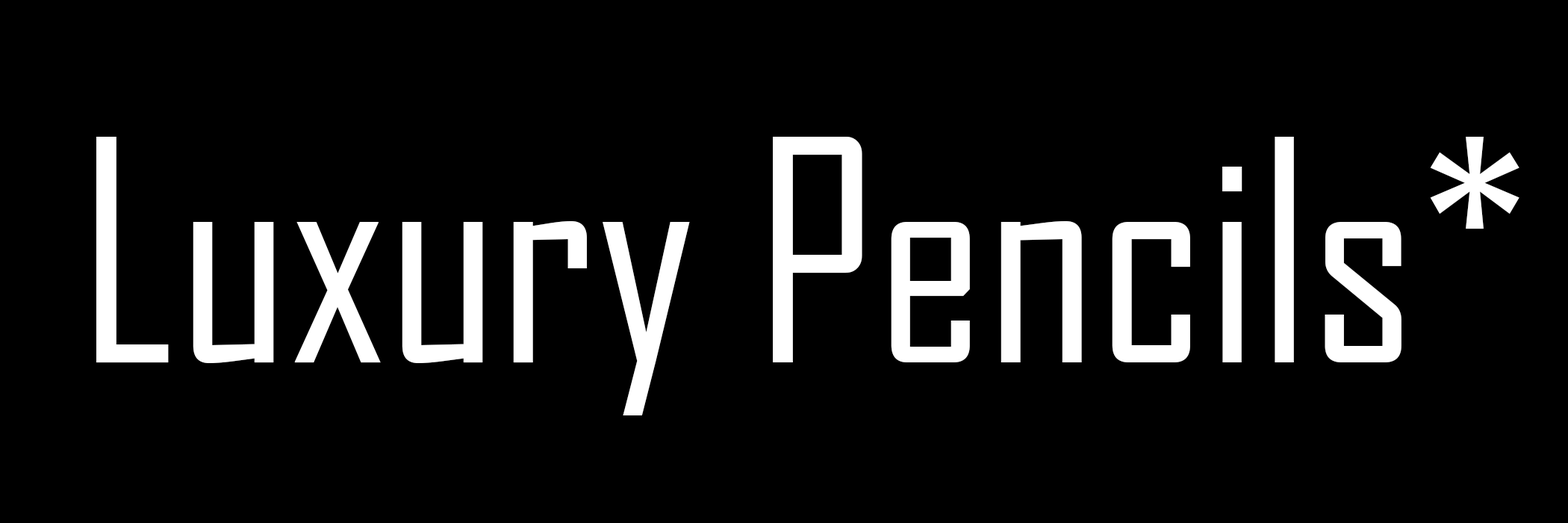
<style>
.page{position:relative;width:1568px;height:523px;background:#000000}
.page>*{position:absolute;margin:0}
.t1{font:294.7px "AgencyFB-Reg";color:#ffffff}
</style>
<div class="page">
<p class="t1" style="left:96px;top:137px;width:1423px;height:278px">Luxury Pencils*</p>
</div>
